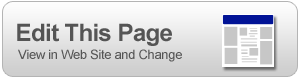
<style>
.page{position:relative;width:300px;height:79px}
.page>*{position:absolute;margin:0}
.t1{font:24px "Arial-BoldMT";letter-spacing:-0.025em;color:#555555}
.t2{font:13px "ArialMT";letter-spacing:-0.025em;color:#555555}
</style>
<div class="page">
<p class="t1" style="left:17px;top:23px;width:155px;height:23px">Edit This Page</p>
<p class="t2" style="left:18px;top:49px;width:164px;height:13px">View in Web Site and Change</p>
</div>
